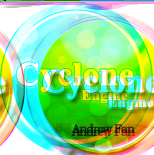
<style>
.page{position:relative;width:154px;height:155px}
.page>*{position:absolute;margin:0}
.t1{font:40px "Aparajita-Bold";font-weight:bold}
.t2{font:18px "Aparajita-Bold";font-weight:bold}
.t3{font:12px "BookmanOldStyle";letter-spacing:-0.1em;color:#1faa00;font-weight:bold}
</style>
<div class="page">
<p class="t1" style="left:16px;top:61px;width:118px;height:31px">Cyclone</p>
<p class="t2" style="left:81px;top:88px;width:47px;height:15px">Engine</p>
<p class="t3" style="left:45px;top:116px;width:64px;height:10px">Andrew Fan</p>
</div>
